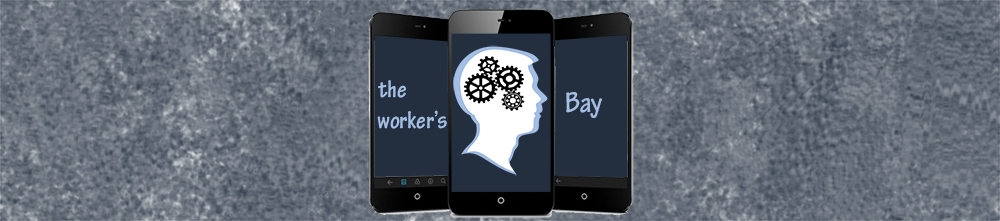
<style>
.page{position:relative;width:1000px;height:221px}
.page>*{position:absolute;margin:0}
.t1{font:25.5px "TektonPro-BoldCond";color:#a5bfe4}
.t2{font:30.6px "TektonPro-BoldCond";color:#a5bfe4}
</style>
<div class="page">
<p class="t1" style="left:377px;top:80px;width:70px;height:49px">the<br>worker’s</p>
<p class="t2" style="left:566px;top:92px;width:36px;height:26px;rotate:-1deg">Bay</p>
</div>
